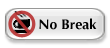
<style>
.page{position:relative;width:110px;height:48px;background:#ffffff}
.page>*{position:absolute;margin:0}
.t1{font:14px "Optima-Bold";color:#000000}
</style>
<div class="page">
<p class="t1" style="left:39px;top:18px;width:58px;height:12px">No Break</p>
</div>
